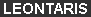
<style>
.page{position:relative;width:91px;height:17px;background:#333333}
.page>*{position:absolute;margin:0}
.t1{font:15px "Arial-BoldMT";color:#ffffff}
</style>
<div class="page">
<p class="t1" style="left:4px;top:3px;width:83px;height:11px">LEONTARIS</p>
</div>
